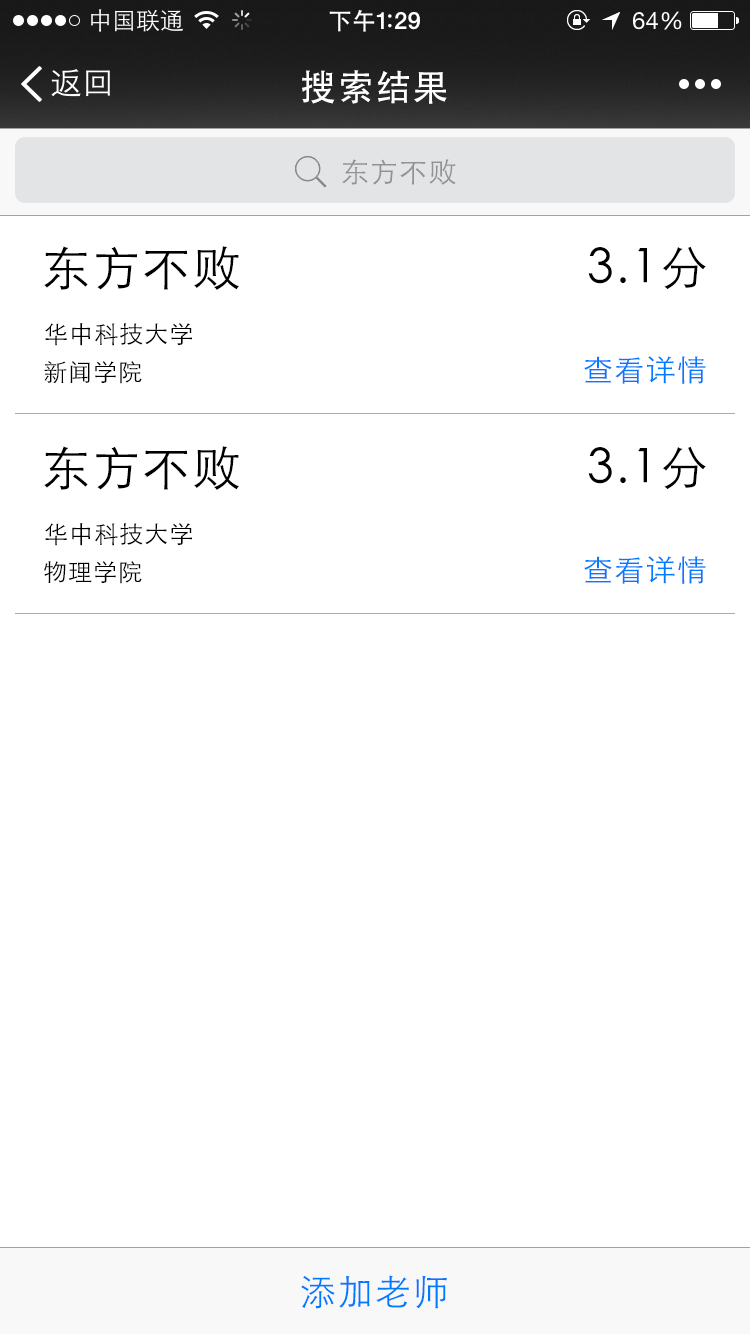
<style>
.page{position:relative;width:750px;height:1334px;background:#ffffff}
.page>*{position:absolute;margin:0}
.t1{font:36px "STHeiti";letter-spacing:0.045em;color:#ffffff}
.t2{font:28px "STXihei";letter-spacing:0.045em;color:#929292}
.t3{font:48px "STXihei";letter-spacing:0.045em;color:#000000}
.t4{font:24px "STXihei";letter-spacing:0.045em;color:#000000}
.t5{font:30px "STXihei";letter-spacing:0.045em;color:#007aff}
.t6{font:36px "STXihei";letter-spacing:0.045em;color:#007aff}
</style>
<div class="page">
<p class="t1" style="left:302px;top:70px;width:145px;height:34px">搜索结果</p>
<p class="t2" style="left:342px;top:159px;width:114px;height:26px">东方不败</p>
<p class="t3" style="left:44px;top:246px;width:195px;height:44px">东方不败</p>
<p class="t3" style="left:588px;top:246px;width:118px;height:43px">3.1分</p>
<p class="t4" style="left:45px;top:323px;width:147px;height:23px">华中科技大学</p>
<p class="t4" style="left:44px;top:361px;width:98px;height:23px">新闻学院</p>
<p class="t5" style="left:584px;top:356px;width:122px;height:28px">查看详情</p>
<p class="t3" style="left:44px;top:446px;width:195px;height:44px">东方不败</p>
<p class="t3" style="left:588px;top:446px;width:118px;height:43px">3.1分</p>
<p class="t4" style="left:45px;top:523px;width:147px;height:23px">华中科技大学</p>
<p class="t5" style="left:584px;top:556px;width:122px;height:28px">查看详情</p>
<p class="t4" style="left:44px;top:561px;width:98px;height:23px">物理学院</p>
<p class="t6" style="left:301px;top:1275px;width:146px;height:34px">添加老师</p>
</div>
